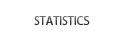
<style>
.page{position:relative;width:122px;height:43px;background:#ffffff}
.page>*{position:absolute;margin:0}
.t1{font:12px "MyriadPro-Regular"}
</style>
<div class="page">
<p class="t1" style="left:34px;top:16px;width:56px;height:9px">STATISTICS</p>
</div>
